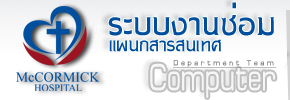
<style>
.page{position:relative;width:290px;height:100px;background:#ffffff}
.page>*{position:absolute;margin:0}
.t1{font:44px "DSNPaNuTat";color:#014e9c}
.t2{font:26px "DSNPaNuTat";color:#014e9c}
.t3{font:10px "DSNPreeCha";letter-spacing:0.26em;color:#838485;text-decoration:underline}
</style>
<div class="page">
<p class="t1" style="left:108px;top:2px;width:167px;height:34px">ระบบงานซ่อม</p>
<p class="t2" style="left:109px;top:39px;width:113px;height:13px">แผนกสารสนเทศ</p>
<p class="t3" style="left:173px;top:60px;width:104px;height:8px">Department Team</p>
</div>
